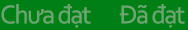
<style>
.page{position:relative;width:188px;height:30px;background:#007f15}
.page>*{position:absolute;margin:0}
.t1{font:27px "Corbel";letter-spacing:-0.06em;color:#69a670}
</style>
<div class="page">
<p class="t1" style="left:1px;top:4px;width:90px;height:24px">Chưa đạt</p>
<p class="t1" style="left:119px;top:4px;width:66px;height:24px">Đã đạt</p>
</div>
